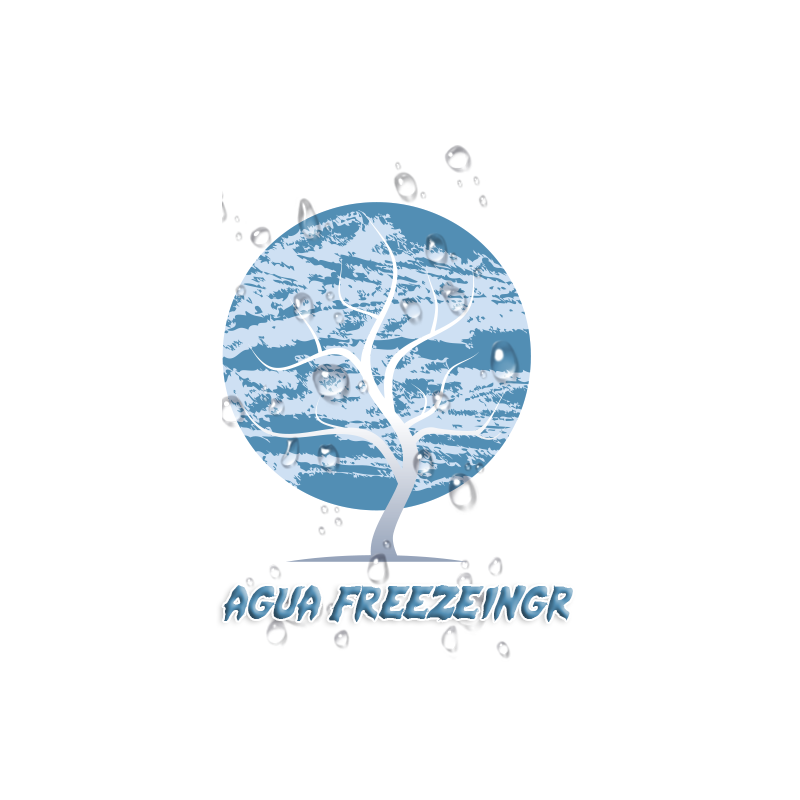
<style>
.page{position:relative;width:800px;height:800px;background:#ffffff}
.page>*{position:absolute;margin:0}
.t1{font:48px "MysticSinglerLightItalic"}
</style>
<div class="page">
<p class="t1" style="left:223px;top:585px;width:350px;height:38px">Agua freezeingr</p>
</div>
